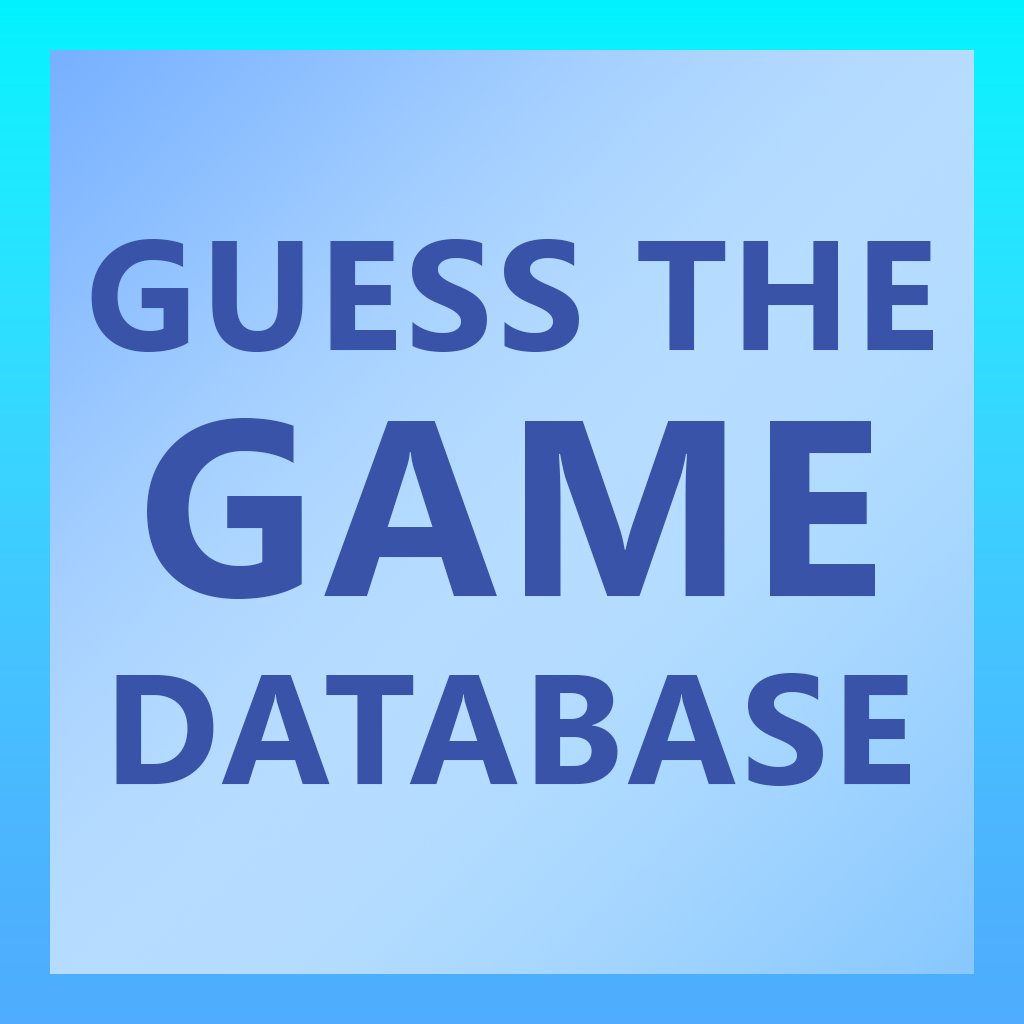
<style>
.page{position:relative;width:1024px;height:1024px}
.page>*{position:absolute;margin:0}
.t1{font:156.4px "SegoeUI-Bold";letter-spacing:0.025em;color:#3953a8}
.t2{font:250.2px "SegoeUI-Bold";letter-spacing:0.025em;color:#3953a8}
</style>
<div class="page">
<p class="t1" style="left:91px;top:239px;width:842px;height:113px">GUESS THE</p>
<p class="t1" style="left:116px;top:418px;width:794px;height:368px;text-align:center"><span class="t2">GAME<br></span>DATABASE</p>
</div>
